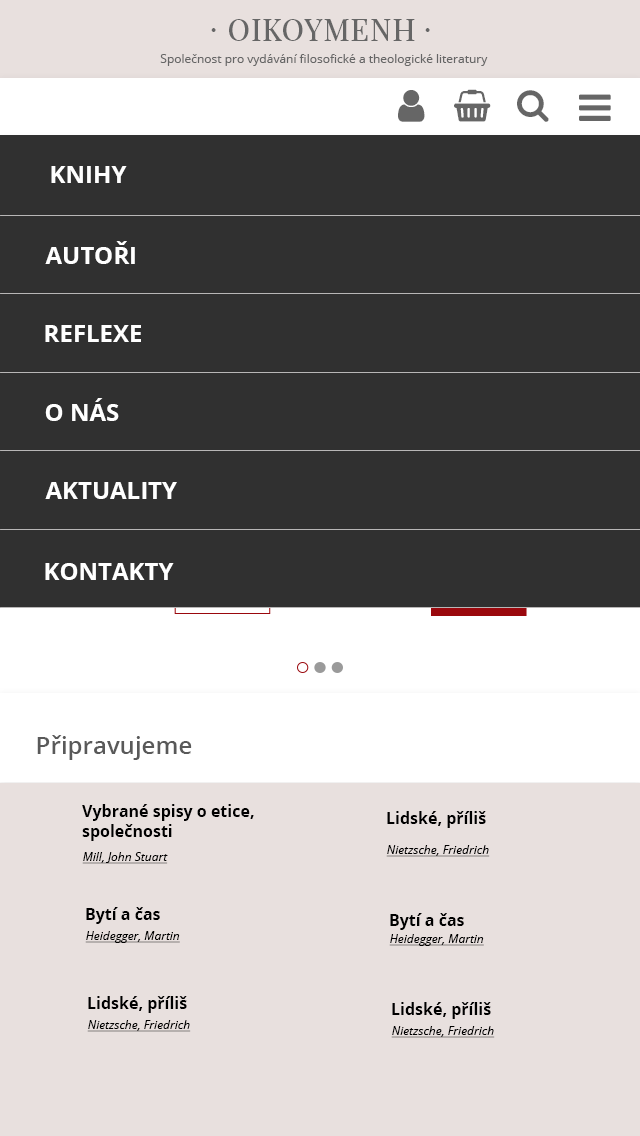
<style>
.page{position:relative;width:640px;height:1136px;background:#303030}
.page>*{position:absolute;margin:0}
.t1{font:30px "PlayfairDisplaySC-Regular";letter-spacing:0.04em;color:#666666}
.t2{font:30px "PlayfairDisplay-Regular";letter-spacing:0.04em;color:#666666}
.t3{font:12px "OpenSans";color:#666666}
.t4{font:24px "OpenSans-Bold";color:#ffffff;text-transform:uppercase}
.t5{font:24px "OpenSans-Semibold";color:#595959}
.t6{font:16px/20px "OpenSans-Bold";color:#000000}
.t7{font:16px "OpenSans-Bold";color:#000000}
.t8{font:12px "OpenSans-Italic";color:#000000;text-decoration:underline}
</style>
<div class="page">
<p class="t1" style="left:211px;top:28px;width:5px;height:4px">·</p>
<p class="t2" style="left:229px;top:19px;width:186px;height:22px">OIKOYMENH</p>
<p class="t1" style="left:425px;top:28px;width:5px;height:4px">·</p>
<p class="t3" style="left:160px;top:54px;width:328px;height:12px">Společnost pro vydávání filosofické a theologické literatury</p>
<p class="t4" style="left:51px;top:166px;width:76px;height:17px">Knihy</p>
<p class="t4" style="left:45px;top:241px;width:90px;height:23px">autoři</p>
<p class="t4" style="left:45px;top:325px;width:96px;height:17px">reflexe</p>
<p class="t4" style="left:45px;top:398px;width:74px;height:23px">o nás</p>
<p class="t4" style="left:45px;top:482px;width:132px;height:17px">Aktuality</p>
<p class="t4" style="left:45px;top:563px;width:129px;height:17px">kontakty</p>
<p class="t5" style="left:37px;top:735px;width:155px;height:25px">Připravujeme</p>
<p class="t6" style="left:82px;top:804px;width:172px;height:37px">Vybrané spisy o etice, společnosti <br>a politice II</p>
<p class="t7" style="left:387px;top:811px;width:99px;height:17px">Lidské, příliš lidské</p>
<p class="t8" style="left:386px;top:845px;width:104px;height:12px">Nietzsche, Friedrich</p>
<p class="t8" style="left:82px;top:852px;width:86px;height:12px">Mill, John Stuart</p>
<p class="t7" style="left:86px;top:907px;width:74px;height:17px">Bytí a čas</p>
<p class="t7" style="left:390px;top:913px;width:74px;height:17px">Bytí a čas</p>
<p class="t8" style="left:85px;top:931px;width:95px;height:12px">Heidegger, Martin</p>
<p class="t8" style="left:389px;top:934px;width:95px;height:12px">Heidegger, Martin</p>
<p class="t7" style="left:88px;top:996px;width:99px;height:17px">Lidské, příliš lidské</p>
<p class="t7" style="left:392px;top:1002px;width:99px;height:17px">Lidské, příliš lidské</p>
<p class="t8" style="left:87px;top:1020px;width:104px;height:12px">Nietzsche, Friedrich</p>
<p class="t8" style="left:391px;top:1026px;width:104px;height:12px">Nietzsche, Friedrich</p>
</div>
